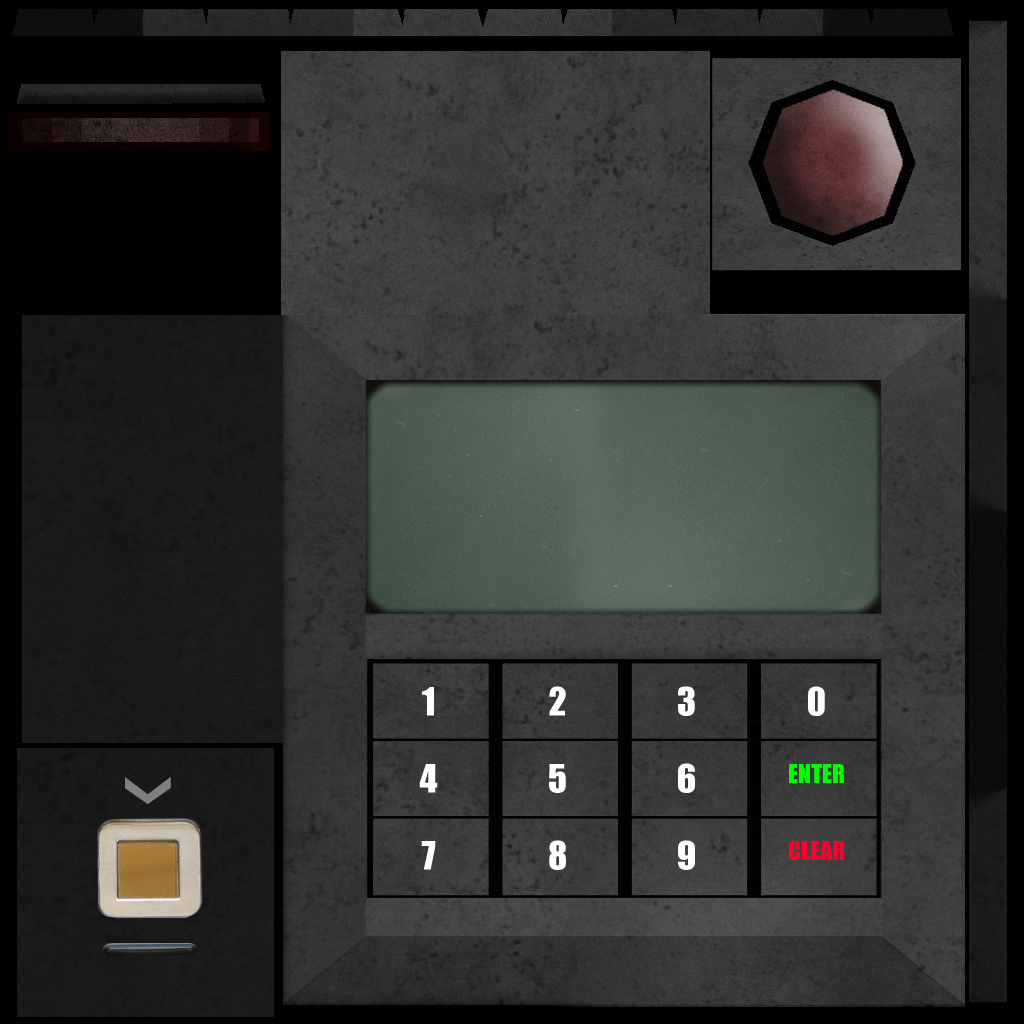
<style>
.page{position:relative;width:1024px;height:1024px}
.page>*{position:absolute;margin:0}
.t1{font:36px "Impact";color:#ffffff}
.t2{font:24px "Impact";color:#00ff00}
.t3{font:24px "Impact";color:#ff002e}
</style>
<div class="page">
<p class="t1" style="left:422px;top:687px;width:12px;height:29px">1</p>
<p class="t1" style="left:549px;top:686px;width:17px;height:30px">2</p>
<p class="t1" style="left:678px;top:686px;width:17px;height:30px">3</p>
<p class="t1" style="left:808px;top:686px;width:17px;height:30px">0</p>
<p class="t1" style="left:419px;top:764px;width:19px;height:29px">4</p>
<p class="t1" style="left:549px;top:764px;width:17px;height:29px">5</p>
<p class="t1" style="left:678px;top:763px;width:17px;height:30px">6</p>
<p class="t2" style="left:789px;top:764px;width:55px;height:19px">ENTER</p>
<p class="t1" style="left:421px;top:841px;width:15px;height:29px">7</p>
<p class="t1" style="left:549px;top:840px;width:17px;height:30px">8</p>
<p class="t1" style="left:678px;top:840px;width:17px;height:30px">9</p>
<p class="t3" style="left:788px;top:840px;width:57px;height:21px">CLEAR</p>
</div>
